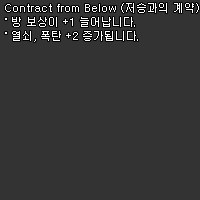
<style>
.page{position:relative;width:200px;height:200px;background:#333333}
.page>*{position:absolute;margin:0}
.t1{font:11px/14px "Dotum";color:#ffffff}
</style>
<div class="page">
<p class="t1" style="left:5px;top:3px;width:194px;height:39px">Contract from Below (저승과의 계약)<br>˚ 방 보상이 +1 늘어납니다.<br>˚ 열쇠, 폭탄 +2 증가됩니다.</p>
</div>
